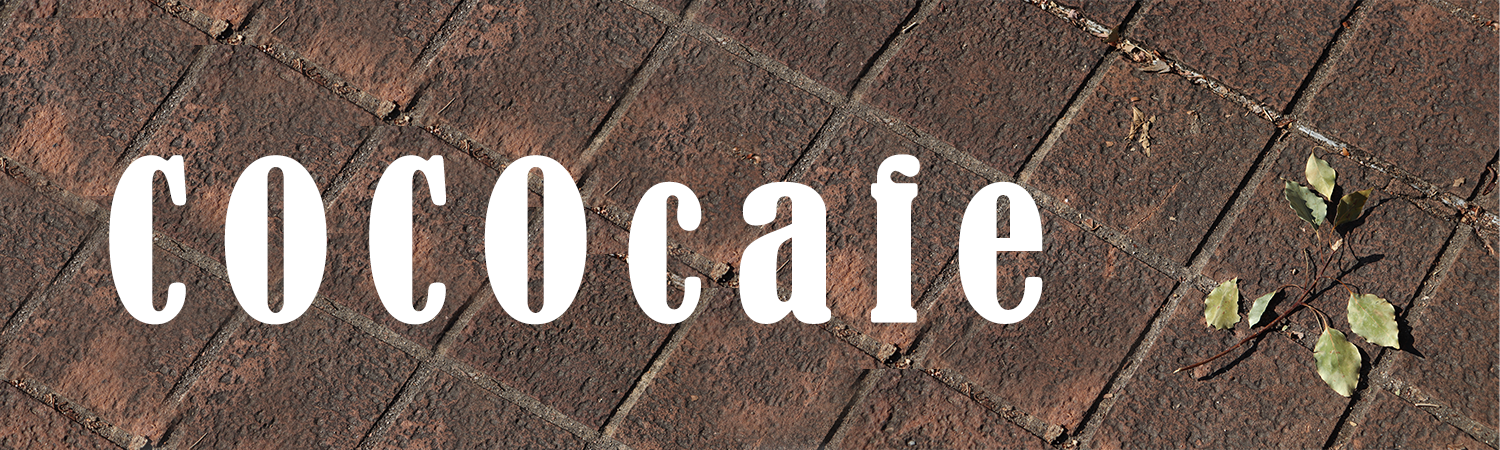
<style>
.page{position:relative;width:1500px;height:450px}
.page>*{position:absolute;margin:0}
.t1{font:208.3px "BernardMT-Condensed";letter-spacing:0.15em;color:#ffffff}
</style>
<div class="page">
<p class="t1" style="left:109px;top:154px;width:934px;height:171px">COCOcafe</p>
</div>
